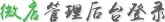
<style>
.page{position:relative;width:165px;height:22px;background:#ffffff}
.page>*{position:absolute;margin:0}
.t1{font:21px "yuweij";color:#5c5c5c}
.t2{font:21px "yuweij";color:#44b549}
</style>
<div class="page">
<p class="t1" style="left:0px;top:0px;width:165px;height:23px"><span class="t2">微店</span>管理后台登录</p>
</div>
